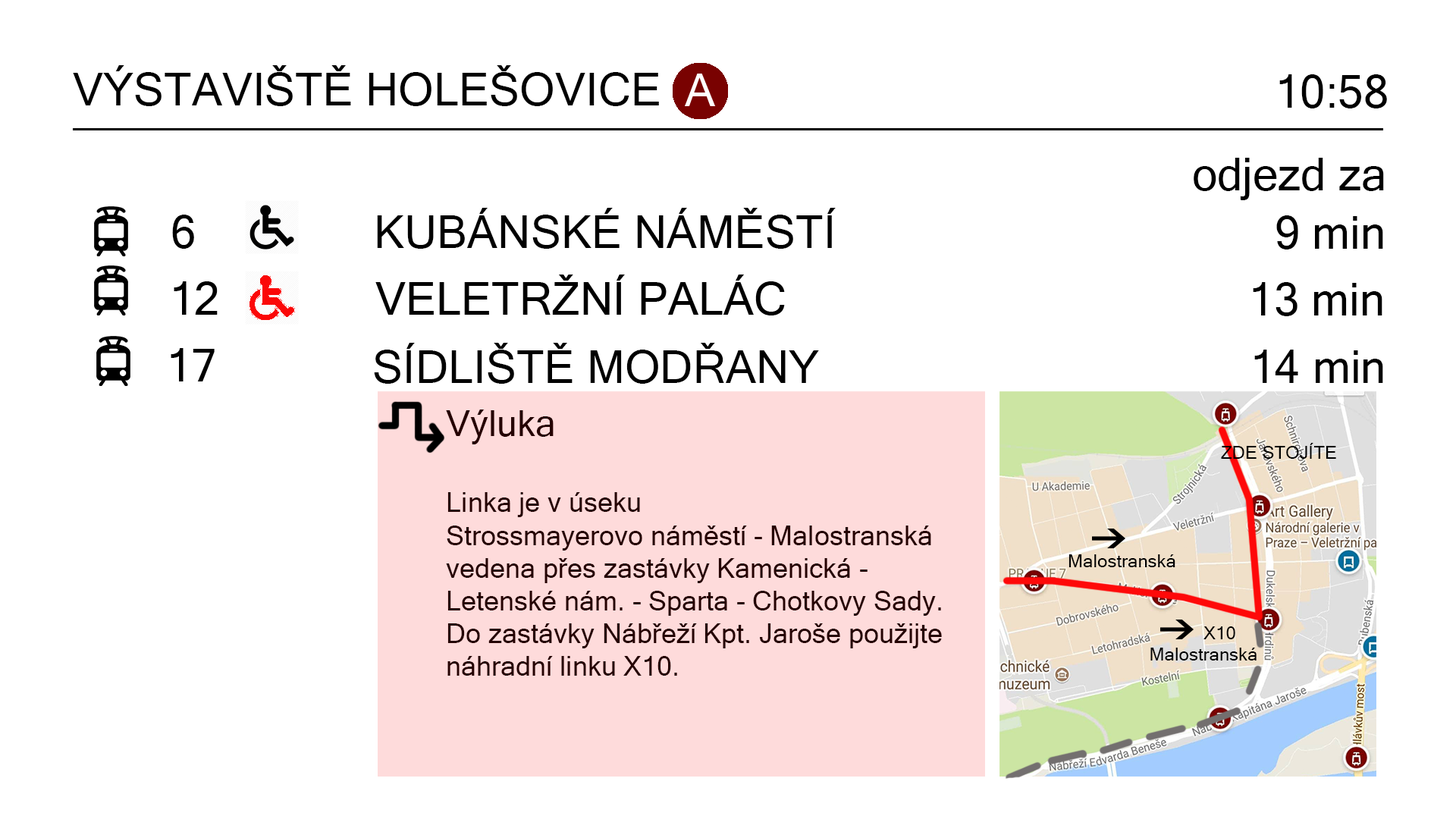
<style>
.page{position:relative;width:1456px;height:819px;background:#ffffff}
.page>*{position:absolute;margin:0}
.t1{font:45.5px "MicrosoftSansSerif";color:#000000}
.t2{font:27.3px "MicrosoftSansSerif";color:#250202}
.t3{font:36.4px "MicrosoftSansSerif";color:#250202}
.t4{font:18.2px "MicrosoftSansSerif";color:#000000}
</style>
<div class="page">
<p class="t1" style="left:73px;top:65px;width:586px;height:41px">VÝSTAVIŠTĚ HOLEŠOVICE</p>
<p class="t1" style="left:1279px;top:74px;width:108px;height:34px">10:58</p>
<p class="t1" style="left:1194px;top:158px;width:190px;height:42px">odjezd za</p>
<p class="t1" style="left:172px;top:208px;width:664px;height:41px">6        KUBÁNSKÉ NÁMĚSTÍ</p>
<p class="t1" style="left:1276px;top:215px;width:107px;height:34px">9 min</p>
<p class="t1" style="left:1253px;top:282px;width:129px;height:34px">13 min</p>
<p class="t1" style="left:374px;top:343px;width:445px;height:41px">SÍDLIŠTĚ MODŘANY</p>
<p class="t1" style="left:1254px;top:350px;width:129px;height:33px">14 min</p>
<p class="t2" style="left:446px;top:409px;width:496px;height:267px"><span class="t3">Výluka<br><br></span>Linka je v úseku <br>Strossmayerovo náměstí - Malostranská <br>vedena přes zastávky Kamenická - <br>Letenské nám. - Sparta - Chotkovy Sady.<br>Do zastávky Nábřeží Kpt. Jaroše použijte <br>náhradní linku X10.</p>
<p class="t4" style="left:1221px;top:443px;width:115px;height:16px">ZDE STOJÍTE</p>
<p class="t4" style="left:1068px;top:554px;width:107px;height:13px">Malostranská</p>
<p class="t4" style="left:1150px;top:626px;width:107px;height:34px">X10<br>Malostranská</p>
</div>
